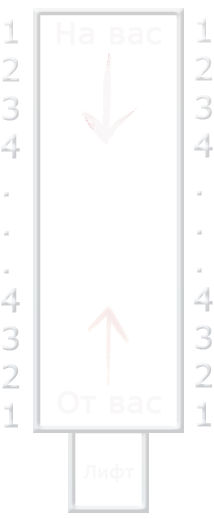
<style>
.page{position:relative;width:214px;height:519px;background:#ffffff}
.page>*{position:absolute;margin:0}
.t1{font:32px "Verdana";color:#e1e4e6;font-weight:bold}
.t2{font:30px "Verdana";color:#f9f7f7;font-weight:bold}
.t3{font:18px "Verdana";color:#f9f7f7;font-weight:bold}
</style>
<div class="page">
<p class="t1" style="left:1px;top:19px;width:19px;height:409px;text-align:right">1<br>2<br>3<br>4<br>.<br>.<br>.<br>4<br>3<br>2<br>1</p>
<p class="t2" style="left:56px;top:22px;width:105px;height:23px">На вас</p>
<p class="t1" style="left:194px;top:18px;width:19px;height:409px;text-align:right">1<br>2<br>3<br>4<br>.<br>.<br>.<br>4<br>3<br>2<br>1</p>
<p class="t2" style="left:57px;top:391px;width:104px;height:23px">От вас</p>
<p class="t3" style="left:83px;top:464px;width:52px;height:19px">Лифт</p>
</div>
